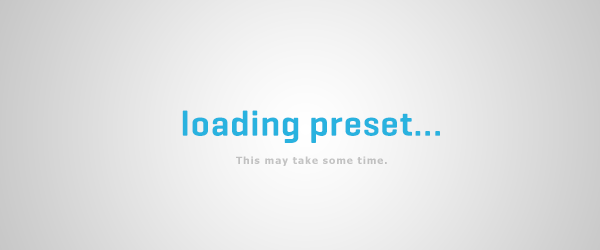
<style>
.page{position:relative;width:600px;height:250px}
.page>*{position:absolute;margin:0}
.t1{font:36px "Geogrotesque-SemiBold";letter-spacing:0.025em;color:#29b2df}
.t2{font:10px "Tahoma-Bold";letter-spacing:0.1em;color:#c3c3c3}
</style>
<div class="page">
<p class="t1" style="left:182px;top:110px;width:258px;height:33px">loading preset...</p>
<p class="t2" style="left:236px;top:156px;width:151px;height:10px">This may take some time.</p>
</div>
